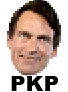
<style>
.page{position:relative;width:68px;height:92px;background:#ffffff}
.page>*{position:absolute;margin:0}
.t1{font:21.5px "Arial-Black";color:#000000}
</style>
<div class="page">
<p class="t1" style="left:11px;top:76px;width:47px;height:15px">PKP</p>
</div>
